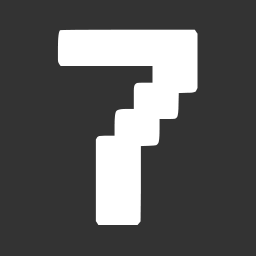
<style>
.page{position:relative;width:256px;height:256px;background:#333333}
.page>*{position:absolute;margin:0}
.t1{font:279.2px "BLOXAT";color:#ffffff}
</style>
<div class="page">
<p class="t1" style="left:57px;top:29px;width:141px;height:196px">7</p>
</div>
